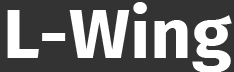
<style>
.page{position:relative;width:234px;height:72px;background:#333333}
.page>*{position:absolute;margin:0}
.t1{font:68.4px "FiraSans-Bold";color:#ffffff;scale:1.05 1}
</style>
<div class="page">
<p class="t1" style="left:7px;top:2px;width:225px;height:71px">L-Wing</p>
</div>
